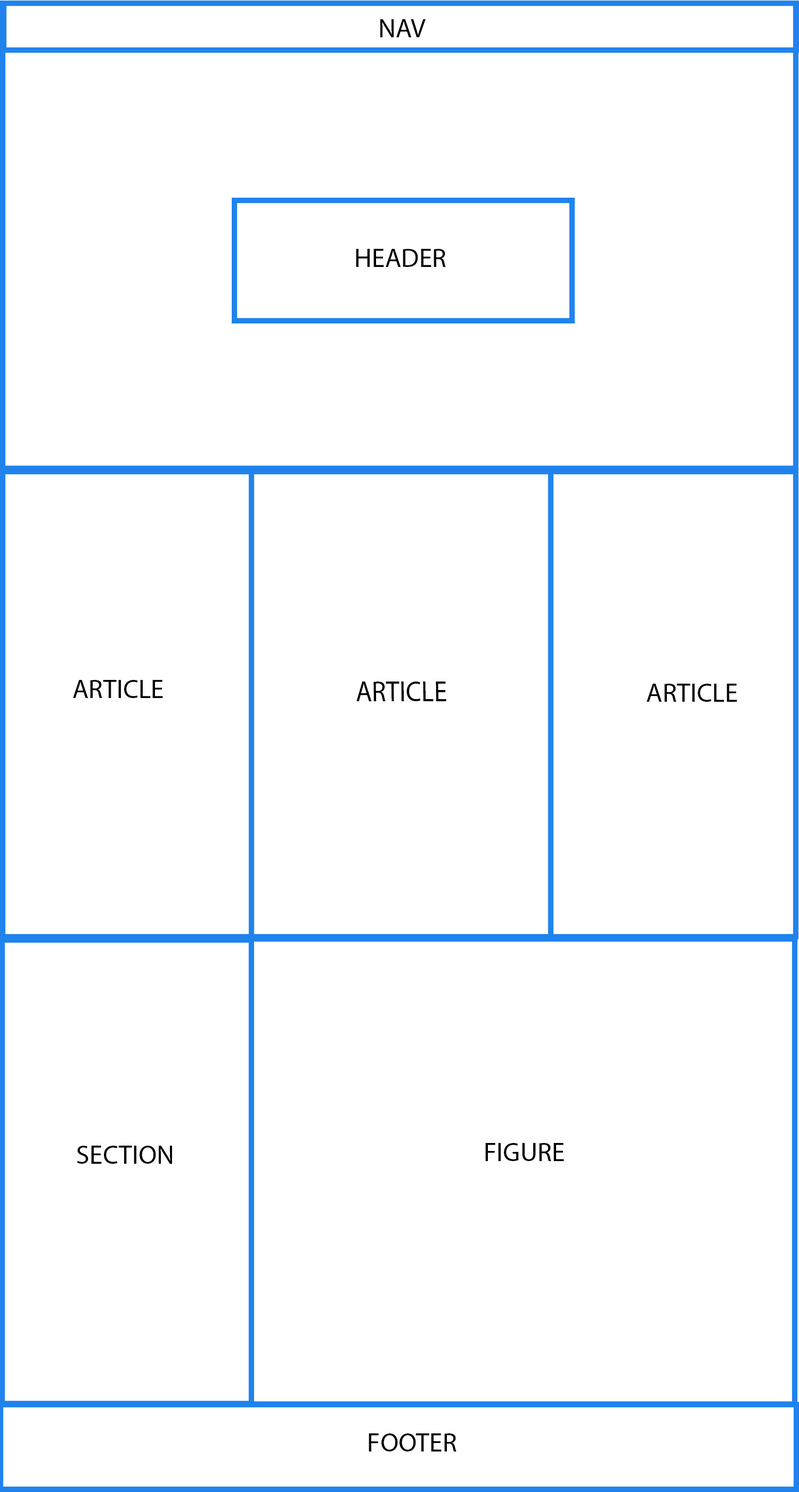
<style>
.page{position:relative;width:799px;height:1492px;background:#ffffff}
.page>*{position:absolute;margin:0}
.t1{font:26.6px "MyriadPro-Regular";color:#000000}
.t2{font:28.8px "MyriadPro-Regular";color:#000000;scale:0.92 1}
</style>
<div class="page">
<p class="t1" style="left:380px;top:19px;width:46px;height:18px">NAV</p>
<p class="t1" style="left:356px;top:249px;width:90px;height:18px">HEADER</p>
<p class="t1" style="left:73px;top:680px;width:90px;height:18px">ARTICLE</p>
<p class="t2" style="left:356px;top:681px;width:91px;height:20px">ARTICLE</p>
<p class="t1" style="left:647px;top:684px;width:90px;height:18px">ARTICLE</p>
<p class="t1" style="left:77px;top:1146px;width:95px;height:18px">SECTION</p>
<p class="t1" style="left:485px;top:1143px;width:79px;height:18px">FIGURE</p>
<p class="t1" style="left:369px;top:1433px;width:88px;height:18px">FOOTER</p>
</div>
